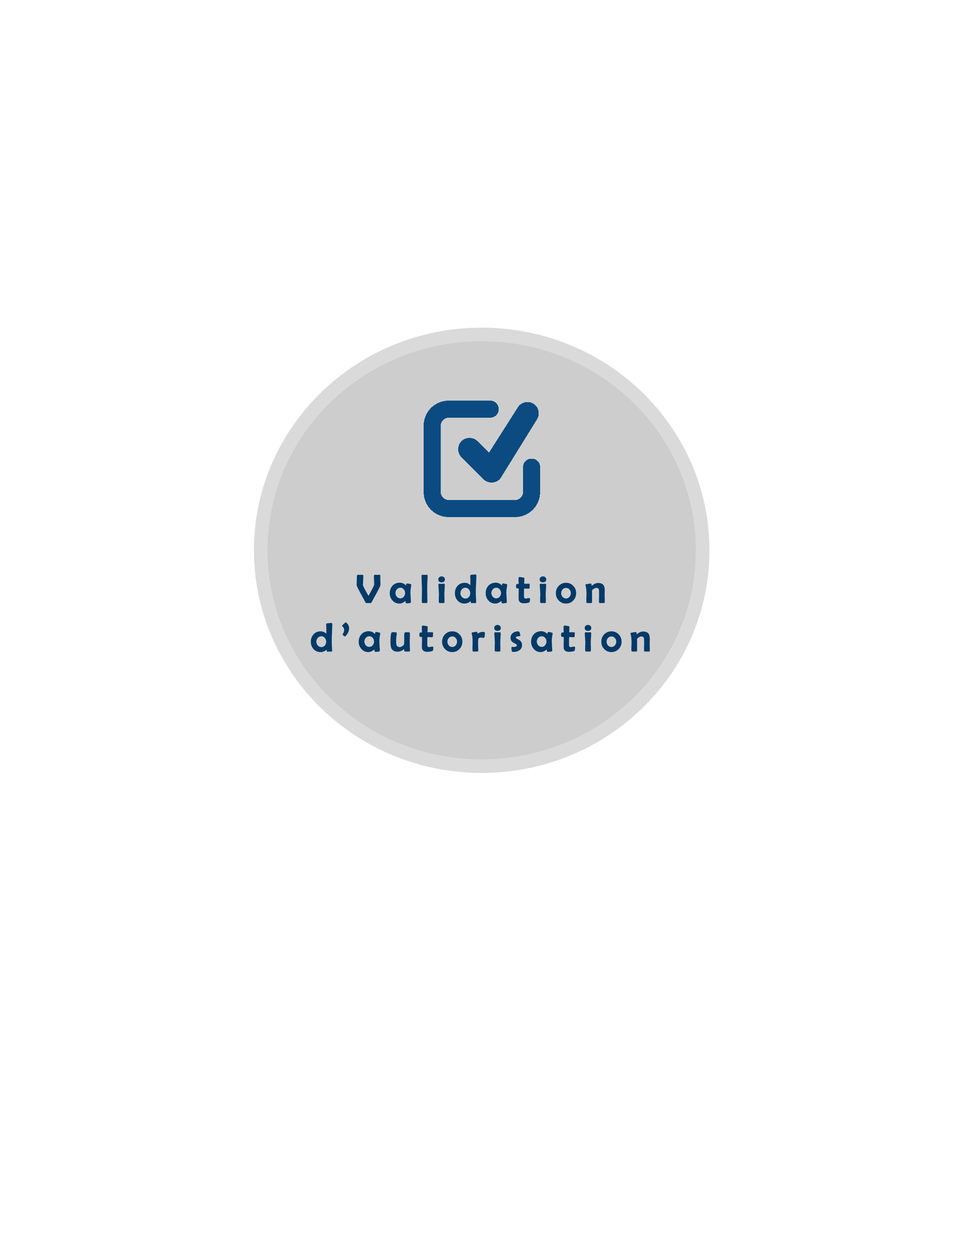
<style>
.page{position:relative;width:963px;height:1238px;background:#ffffff}
.page>*{position:absolute;margin:0}
.t1{font:39.6px "BerlinSansFB-Reg";letter-spacing:0.18em;color:#023a68;font-weight:bold}
</style>
<div class="page">
<p class="t1" style="left:311px;top:574px;width:339px;height:78px;text-align:center">Validation<br>d’autorisation</p>
</div>
